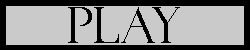
<style>
.page{position:relative;width:250px;height:50px;background:#cacaca}
.page>*{position:absolute;margin:0}
.t1{font:50px "FelixTitlingMT";color:#000000}
</style>
<div class="page">
<p class="t1" style="left:68px;top:7px;width:112px;height:36px">Play</p>
</div>
